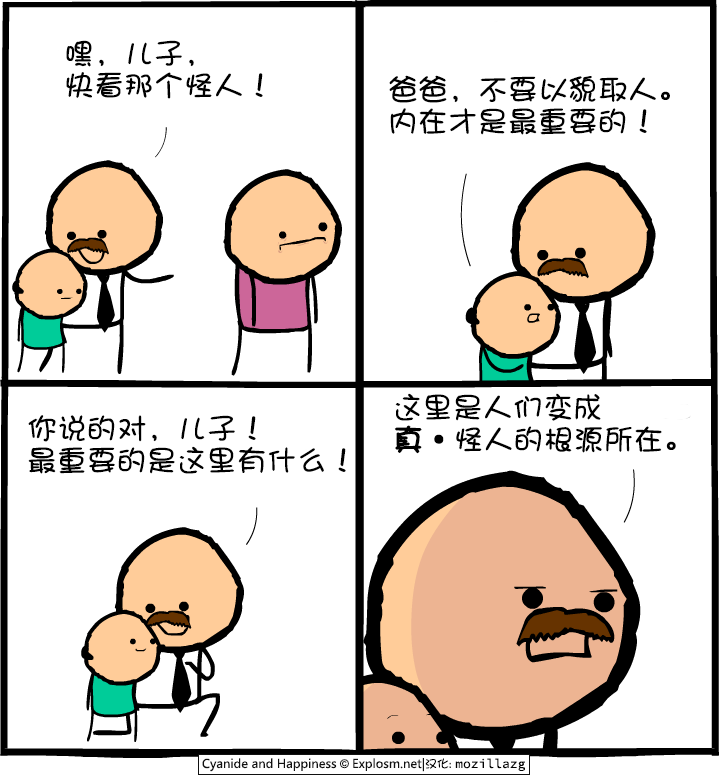
<style>
.page{position:relative;width:720px;height:780px;background:#ffffff}
.page>*{position:absolute;margin:0}
.t1{font:30px/32px "DFShaoNvW5";color:#000000}
.t2{font:30px/32px "DFShaoNvW5";color:#000000;font-weight:bold}
</style>
<div class="page">
<p class="t1" style="left:66px;top:40px;width:197px;height:59px">嘿，儿子，<br>快看那个怪人！</p>
<p class="t1" style="left:389px;top:75px;width:281px;height:60px">爸爸，不要以貌取人。<br>内在才是最重要的！</p>
<p class="t1" style="left:394px;top:393px;width:282px;height:61px">这里是人们变成<br><span class="t2">真</span>•怪人的根源所在。</p>
<p class="t1" style="left:28px;top:415px;width:318px;height:59px">你说的对，儿子！<br>最重要的是这里有什么！</p>
</div>
